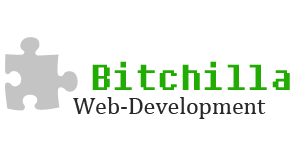
<style>
.page{position:relative;width:300px;height:150px;background:#ffffff}
.page>*{position:absolute;margin:0}
.t1{font:36px "Fixedsys";color:#22ab03}
.t2{font:24px "Cambria";color:#282828}
</style>
<div class="page">
<p class="t1" style="left:92px;top:61px;width:198px;height:29px">Bitchilla</p>
<p class="t2" style="left:73px;top:97px;width:193px;height:22px">Web-Development</p>
</div>
